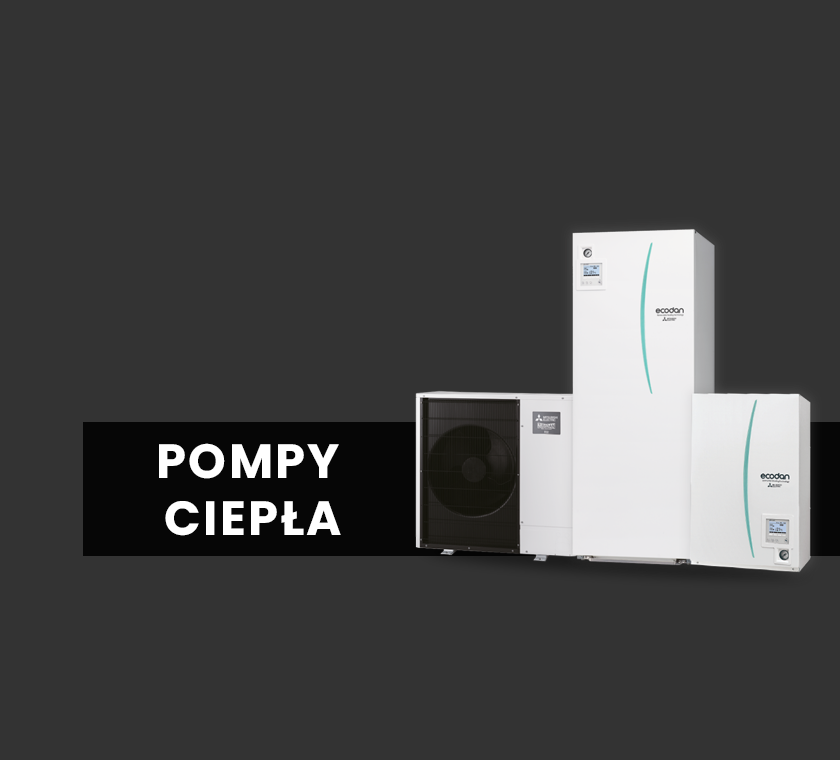
<style>
.page{position:relative;width:840px;height:760px;background:#333333}
.page>*{position:absolute;margin:0}
.t1{font:48px "Poppins-Bold";letter-spacing:0.05em;color:#ffffff}
</style>
<div class="page">
<p class="t1" style="left:159px;top:443px;width:182px;height:93px;text-align:center">POMPY <br>CIEPŁA</p>
</div>
